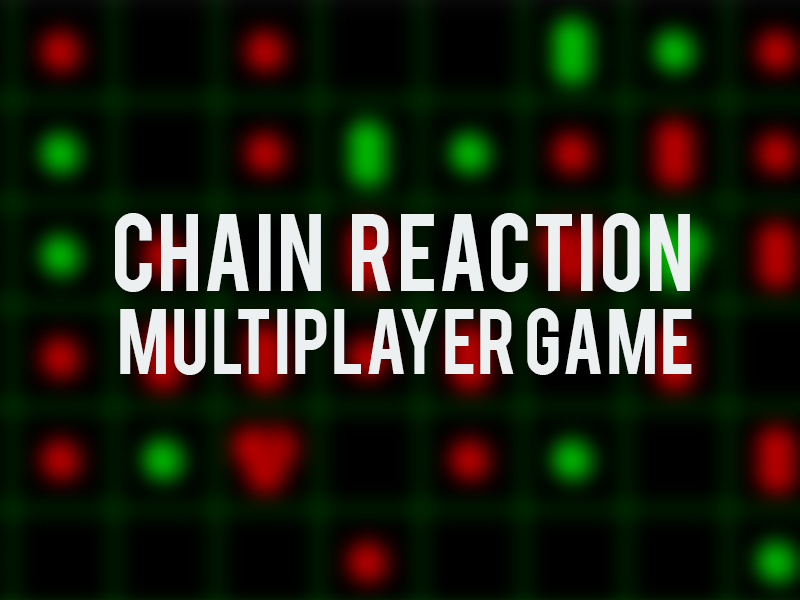
<style>
.page{position:relative;width:800px;height:600px}
.page>*{position:absolute;margin:0}
.t1{font:86px/83.1px "Bebas";color:#ecf0f1}
.t2{font:73.4px/83.1px "Bebas";color:#ecf0f1}
</style>
<div class="page">
<p class="t1" style="left:115px;top:213px;width:577px;height:162px;text-align:center">Chain   Reaction <br><span class="t2">Multiplayer Game</span></p>
</div>
